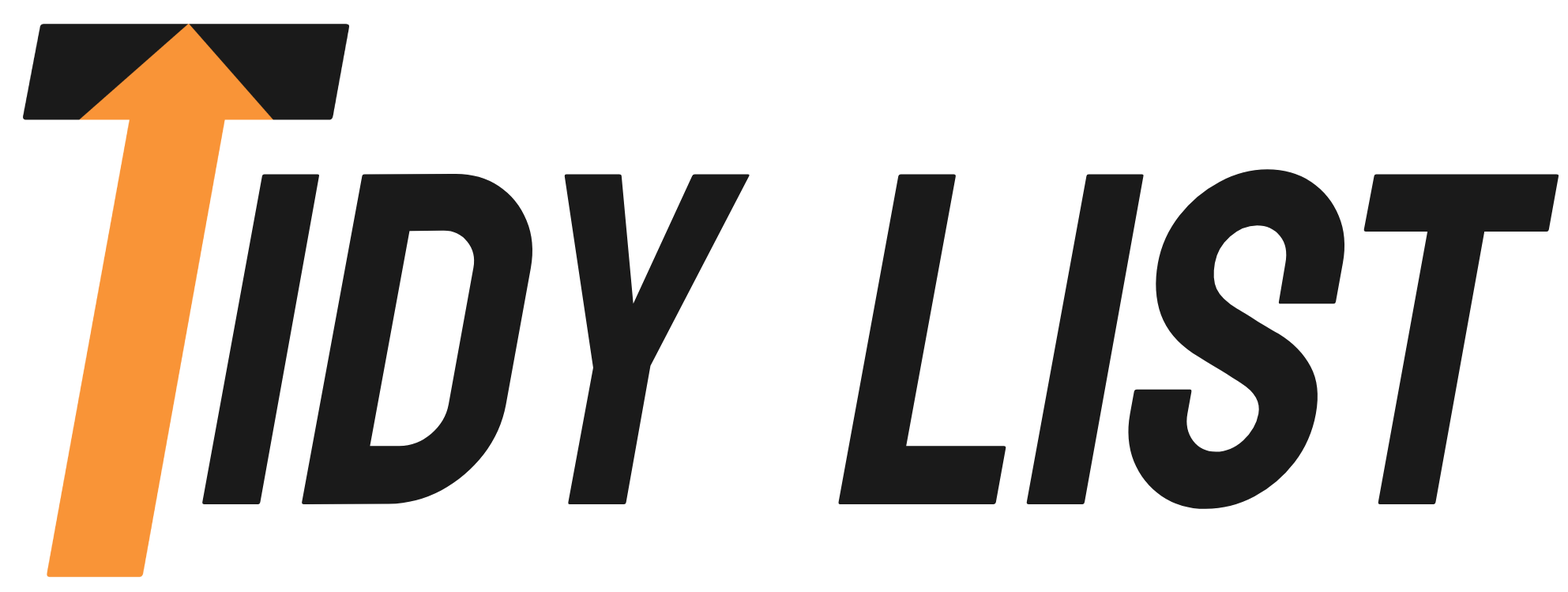
<style>
.page{position:relative;width:1568px;height:592px;background:#ffffff}
.page>*{position:absolute;margin:0}
.t1{font:474px "Bayon-Regular";color:#1a1a1a;font-style:italic}
</style>
<div class="page">
<p class="t1" style="left:201px;top:169px;width:1358px;height:340px">idy list</p>
</div>
